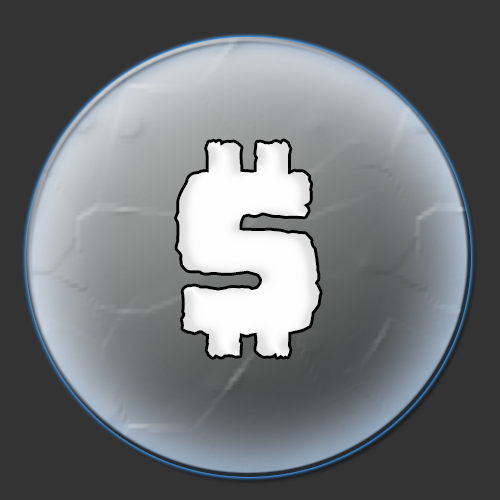
<style>
.page{position:relative;width:500px;height:500px;background:#333333}
.page>*{position:absolute;margin:0}
.t1{font:364px "DestroyEarthBB";color:#fefefe}
</style>
<div class="page">
<p class="t1" style="left:177px;top:141px;width:143px;height:216px">$</p>
</div>
